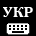
<style>
.page{position:relative;width:36px;height:36px;background:#000000}
.page>*{position:absolute;margin:0}
.t1{font:16px "Cambria-Bold";color:#ffffff}
</style>
<div class="page">
<p class="t1" style="left:3px;top:7px;width:30px;height:10px">УКР</p>
</div>
